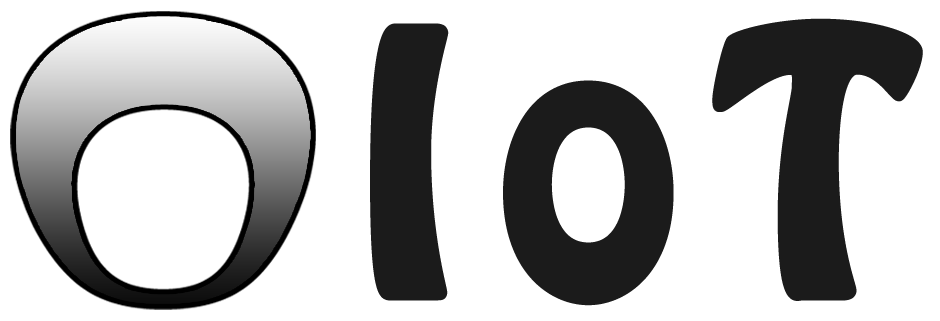
<style>
.page{position:relative;width:940px;height:321px;background:#ffffff}
.page>*{position:absolute;margin:0}
.t1{font:322px "HoboStd";letter-spacing:0.1em;color:#1b1b1b;font-weight:bold}
</style>
<div class="page">
<p class="t1" style="left:370px;top:18px;width:553px;height:288px">IoT</p>
</div>
